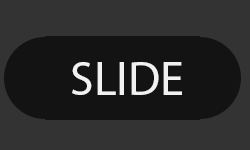
<style>
.page{position:relative;width:250px;height:150px;background:#333333}
.page>*{position:absolute;margin:0}
.t1{font:48px "MyriadPro-Regular";color:#f1f1f1}
</style>
<div class="page">
<p class="t1" style="left:72px;top:62px;width:110px;height:33px">SLIDE</p>
</div>
